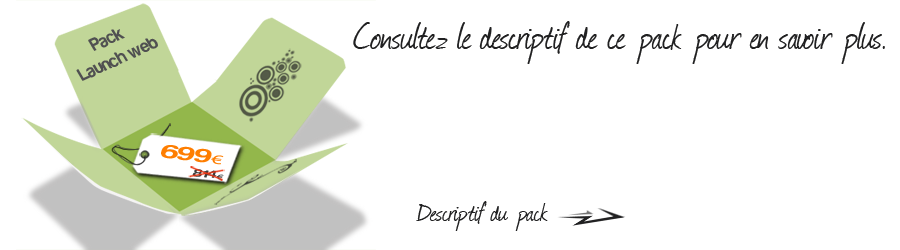
<style>
.page{position:relative;width:900px;height:250px;background:#ffffff}
.page>*{position:absolute;margin:0}
.t1{font:18.7px "Harabara";color:#505051;scale:0.93 1}
.t2{font:44px "Journal";color:#202021;scale:0.95 1}
.t3{font:20.2px "Harabara";color:#fe7e01;scale:1.65 1}
.t4{font:13.5px "MyriadPro-Regular";color:#fe7e01;scale:1.65 1}
.t5{font:10.9px "Harabara";scale:1.64 1}
.t6{font:7.6px "MyriadPro-Regular";scale:1.64 1}
.t7{font:30px "Journal";color:#202021}
</style>
<div class="page">
<p class="t1" style="left:76px;top:29px;width:82px;height:52px;text-align:center;rotate:-24deg">Pack<br>Launch web</p>
<p class="t2" style="left:353px;top:21px;width:532px;height:43px">Consultez le descriptif de ce pack pour en savoir plus.</p>
<p class="t3" style="left:161px;top:145px;width:63px;height:20px;rotate:7deg">699<span class="t4">€</span></p>
<p class="t5" style="left:192px;top:169px;width:32px;height:11px;rotate:7deg">814<span class="t6">€</span></p>
<p class="t7" style="left:416px;top:201px;width:132px;height:30px">Descriptif du pack</p>
</div>
